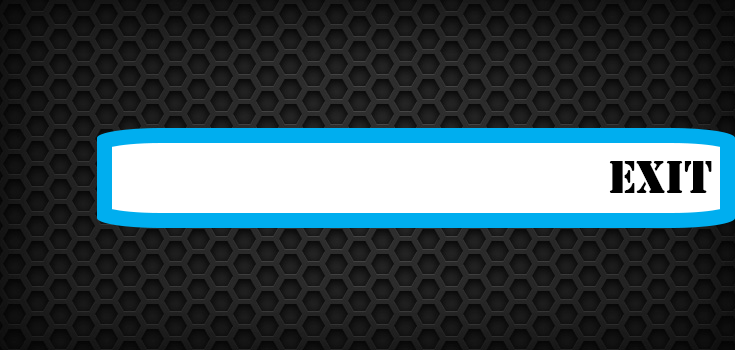
<style>
.page{position:relative;width:735px;height:350px}
.page>*{position:absolute;margin:0}
.t1{font:48px "Stencil";color:#000000}
</style>
<div class="page">
<p class="t1" style="left:609px;top:161px;width:103px;height:32px">EXIT</p>
</div>
